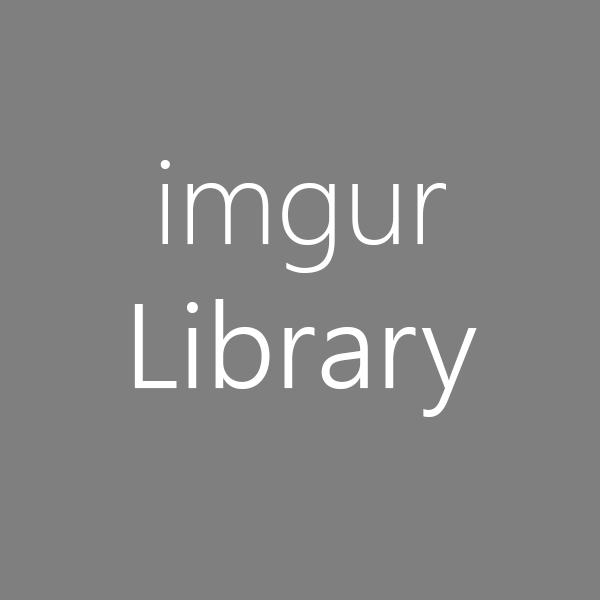
<style>
.page{position:relative;width:600px;height:600px;background:#7f7f7f}
.page>*{position:absolute;margin:0}
.t1{font:120px "SegoeUI-Semilight";color:#ffffff}
.t2{font:120px "SegoeUI-Light";color:#ffffff}
</style>
<div class="page">
<p class="t1" style="left:134px;top:160px;width:343px;height:257px;text-align:center"><span class="t2">imgur <br></span>Library and</p>
</div>
